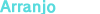
<style>
.page{position:relative;width:100px;height:14px;background:#ffffff}
.page>*{position:absolute;margin:0}
.t1{font:14.8px "RodinProN-DB";color:#59dbdd;font-weight:bold}
</style>
<div class="page">
<p class="t1" style="left:0px;top:0px;width:56px;height:16px">Arranjo</p>
</div>
